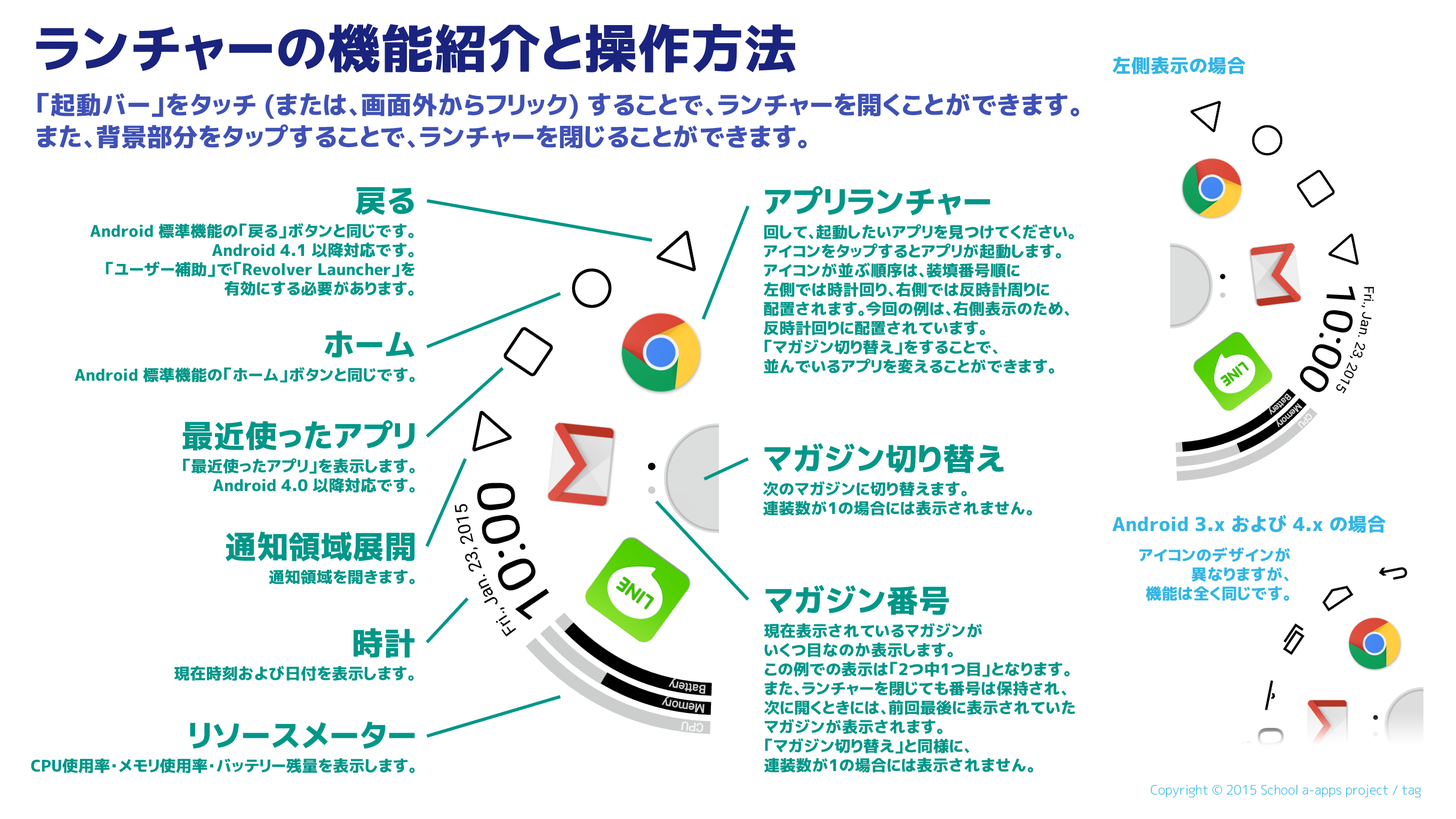
<style>
.page{position:relative;width:1456px;height:819px;background:#ffffff}
.page>*{position:absolute;margin:0}
.t1{font:53.3px "mgenplus-2cp-heavy";color:#1a237e}
.t2{font:19.2px "mgenplus-2cp-heavy";color:#33b5e5}
.t3{font:25.6px/32px "mgenplus-2cp-heavy";color:#3f51b5}
.t4{font:16px/19.2px "mgenplus-2cp-heavy";color:#009688}
.t5{font:32px/38.4px "mgenplus-2cp-heavy";color:#009688}
.t6{font:16px/38.4px "mgenplus-2cp-heavy";color:#009688}
.t7{font:16px/19.2px "mgenplus-2cp-heavy";color:#33b5e5}
.t8{font:12.8px "mgenplus-2cp-light";color:#33b5e5}
</style>
<div class="page">
<p class="t1" style="left:36px;top:23px;width:760px;height:50px">ランチャーの機能紹介と操作方法</p>
<p class="t2" style="left:1112px;top:57px;width:133px;height:18px">左側表示の場合</p>
<p class="t3" style="left:37px;top:93px;width:1042px;height:56px">「起動バー」をタッチ (または、画面外からフリック) することで、ランチャーを開くことができます。<br>また、背景部分をタップすることで、ランチャーを閉じることができます。</p>
<p class="t4" style="left:90px;top:187px;width:324px;height:109px;text-align:right"><span class="t5">戻る<br></span>Android 標準機能の「戻る」ボタンと同じです。<br>Android 4.1 以降対応です。<br>「ユーザー補助」で「Revolver Launcher」を<br>有効にする必要があります。</p>
<p class="t4" style="left:764px;top:186px;width:310px;height:188px"><span class="t5">アプリランチャー<br></span>回して、起動したいアプリを見つけてください。<br>アイコンをタップするとアプリが起動します。<br>アイコンが並ぶ順序は、装填番号順に<br>左側では時計回り、右側では反時計周りに<br>配置されます。今回の例は、右側表示のため、<br>反時計回りに配置されています。<br>「マガジン切り替え」をすることで、<br>並んでいるアプリを変えることができます。</p>
<p class="t6" style="left:75px;top:331px;width:340px;height:52px;text-align:right"><span class="t5">ホーム<br></span>Android 標準機能の「ホーム」ボタンと同じです。</p>
<p class="t4" style="left:182px;top:420px;width:233px;height:73px;text-align:right"><span class="t5">最近使ったアプリ<br></span>「最近使ったアプリ」を表示します。<br>Android 4.0 以降対応です。</p>
<p class="t4" style="left:763px;top:443px;width:269px;height:73px"><span class="t5">マガジン切り替え<br></span>次のマガジンに切り替えます。<br>連装数が1の場合には表示されません。</p>
<p class="t2" style="left:1112px;top:515px;width:273px;height:18px">Android 3.x および 4.x の場合</p>
<p class="t6" style="left:226px;top:531px;width:189px;height:53px;text-align:right"><span class="t5">通知領域展開</span><br>通知領域を開きます。</p>
<p class="t7" style="left:1139px;top:547px;width:151px;height:54px;text-align:right">アイコンのデザインが<br>異なりますが、<br>機能は全く同じです。</p>
<p class="t4" style="left:764px;top:585px;width:311px;height:188px"><span class="t5">マガジン番号<br></span>現在表示されているマガジンが<br>いくつ目なのか表示します。<br>この例での表示は「2つ中1つ目」となります。<br>また、ランチャーを閉じても番号は保持され、<br>次に開くときには、前回最後に表示されていた<br>マガジンが表示されます。<br>「マガジン切り替え」と同様に、<br>連装数が1の場合には表示されません。</p>
<p class="t6" style="left:174px;top:628px;width:241px;height:53px;text-align:right"><span class="t5">時計<br></span>現在時刻および日付を表示します。</p>
<p class="t6" style="left:31px;top:722px;width:384px;height:51px;text-align:right"><span class="t5">リソースメーター<br></span>CPU使用率・メモリ使用率・バッテリー残量を表示します。</p>
<p class="t8" style="left:1150px;top:784px;width:271px;height:14px">Copyright © 2015 School a-apps project / tag</p>
</div>
